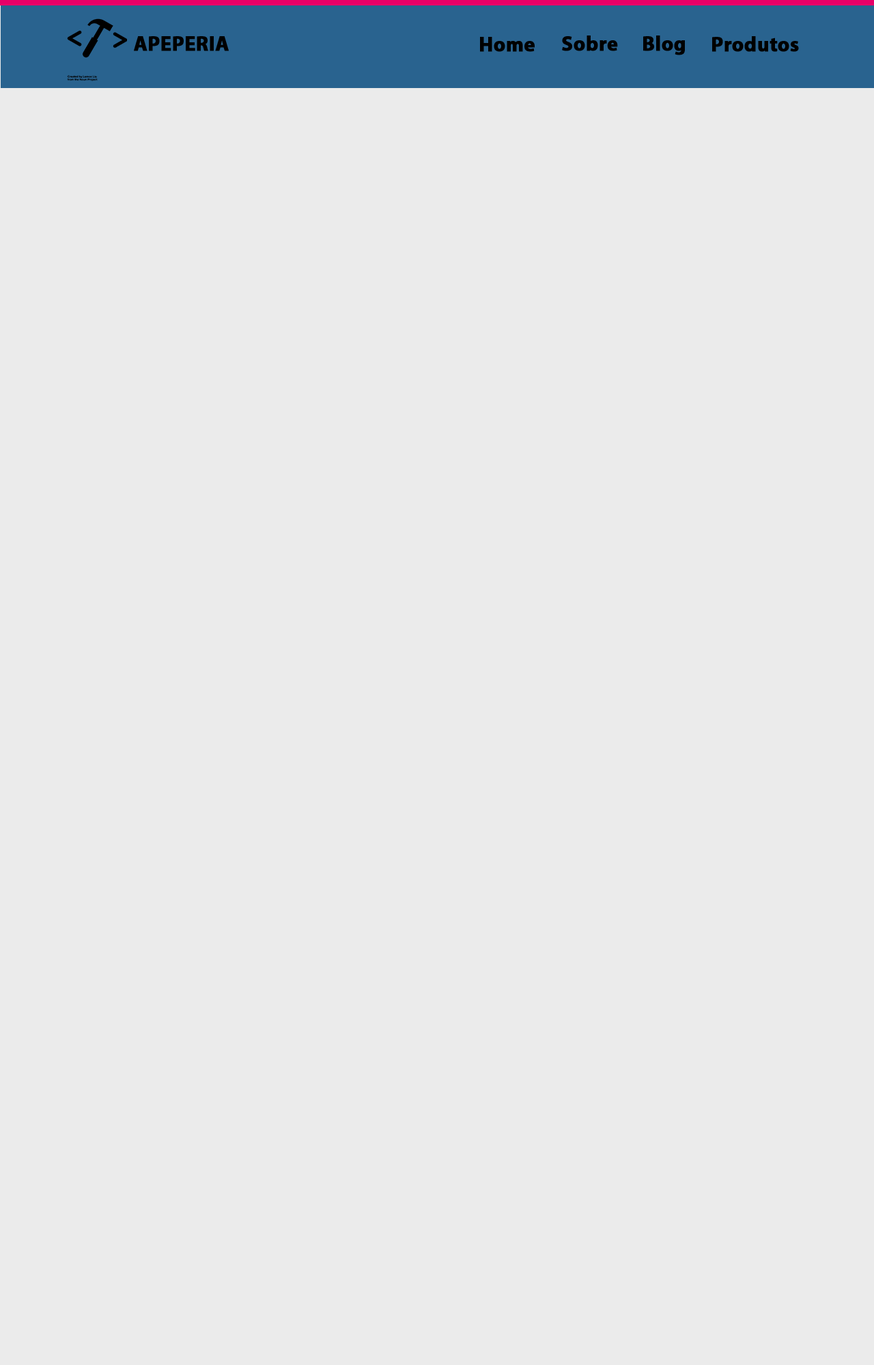
<style>
.page{position:relative;width:874px;height:1365px;background:#ebebeb}
.page>*{position:absolute;margin:0}
.t1{font:20.5px "MyriadPro-Bold";color:#000000;font-weight:bold}
</style>
<div class="page">
<p class="t1" style="left:134px;top:36px;width:95px;height:15px">APEPERIA</p>
<p class="t1" style="left:480px;top:37px;width:54px;height:15px">Home</p>
<p class="t1" style="left:562px;top:35px;width:56px;height:16px">Sobre</p>
<p class="t1" style="left:643px;top:35px;width:42px;height:20px">Blog</p>
<p class="t1" style="left:712px;top:36px;width:87px;height:16px">Produtos</p>
</div>
